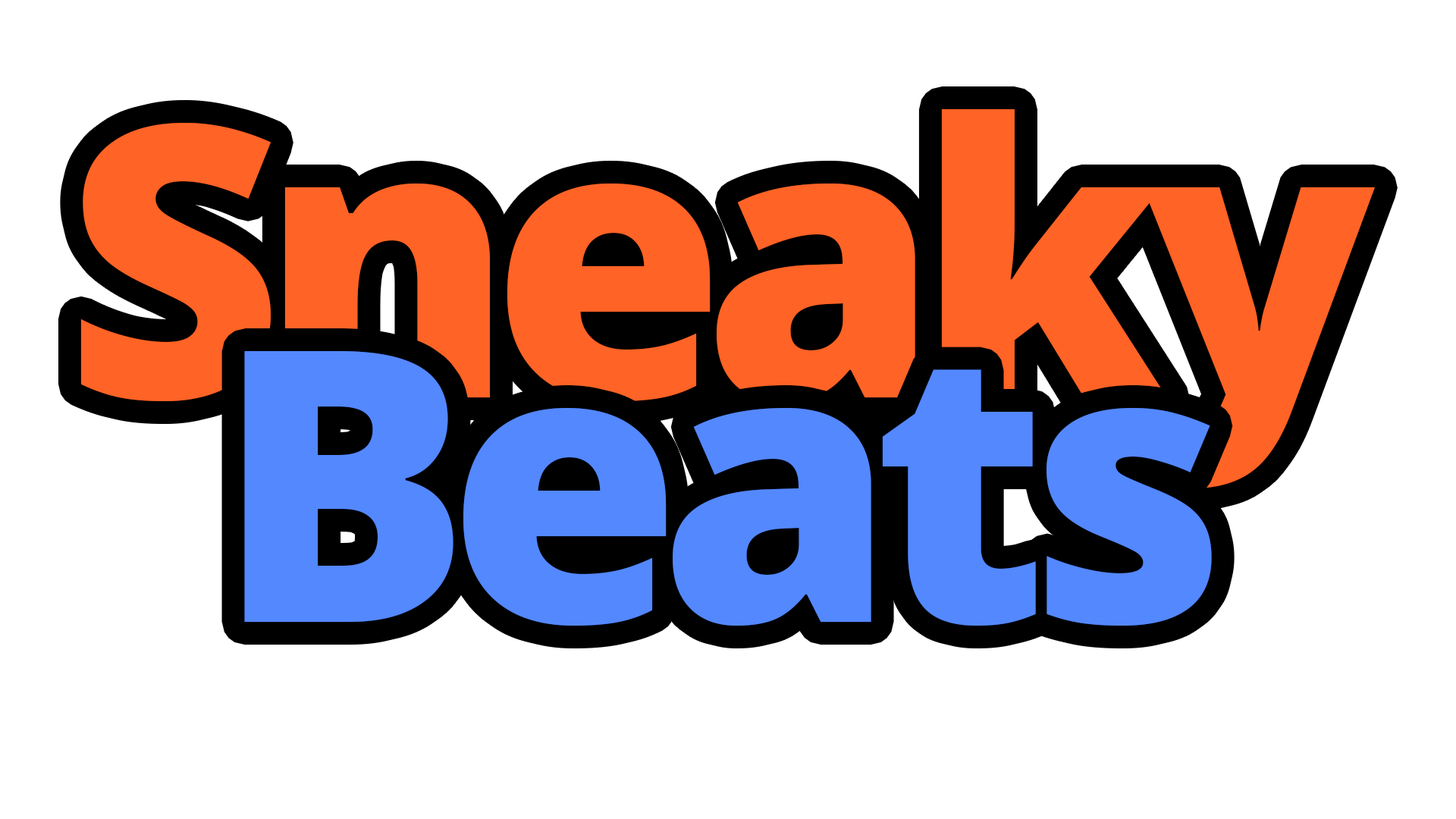
<style>
.page{position:relative;width:1456px;height:819px;background:#ffffff}
.page>*{position:absolute;margin:0}
.t1{font:379.2px "OpenSans-ExtraBold";letter-spacing:-0.06em;color:#ff6326}
.t2{font:379.2px "OpenSans-ExtraBold";letter-spacing:-0.06em;color:#5488ff}
</style>
<div class="page">
<p class="t1" style="left:80px;top:109px;width:1295px;height:379px">Sneaky</p>
<p class="t2" style="left:244px;top:351px;width:968px;height:275px">Beats</p>
</div>
